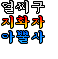
<style>
.page{position:relative;width:58px;height:59px;background:#ffffff}
.page>*{position:absolute;margin:0}
.t1{font:15px "Sam3KRFont";color:#ffffff}
.t2{font:15px "Sam3KRFont";color:#efefef}
.t3{font:15px "Sam3KRFont"}
</style>
<div class="page">
<p class="t1" style="left:2px;top:1px;width:42px;height:12px">얼씨구</p>
<p class="t2" style="left:2px;top:1px;width:42px;height:12px">얼씨구</p>
<p class="t3" style="left:2px;top:16px;width:42px;height:12px">지화자</p>
<p class="t3" style="left:2px;top:31px;width:42px;height:12px">아뿔사</p>
</div>
